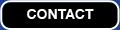
<style>
.page{position:relative;width:120px;height:30px;background:#000000}
.page>*{position:absolute;margin:0}
.t1{font:14px "Helvetica-Bold";color:#ffffff}
</style>
<div class="page">
<p class="t1" style="left:27px;top:9px;width:67px;height:10px">CONTACT</p>
</div>
